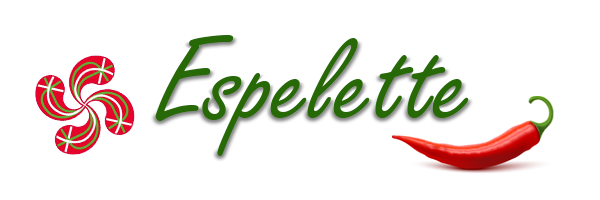
<style>
.page{position:relative;width:600px;height:200px;background:#ffffff}
.page>*{position:absolute;margin:0}
.t1{font:130px "FreestyleScript-Regular";color:#276906}
</style>
<div class="page">
<p class="t1" style="left:155px;top:35px;width:314px;height:121px">Espelette</p>
</div>
